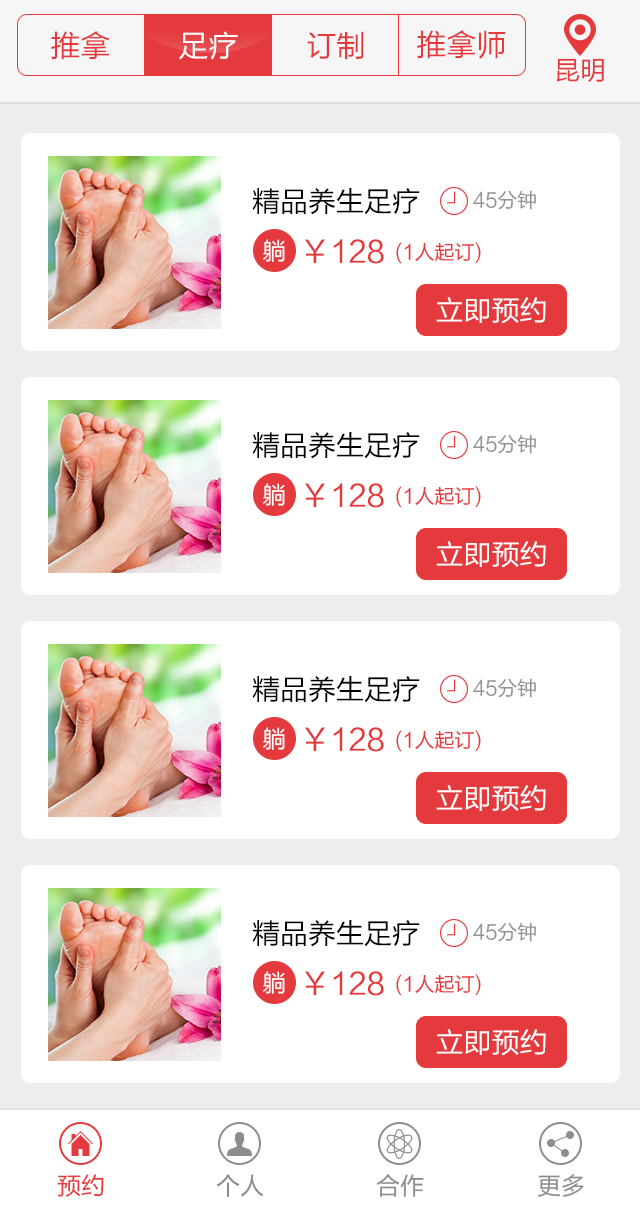
<style>
.page{position:relative;width:640px;height:1211px;background:#ffffff}
.page>*{position:absolute;margin:0}
.t1{font:30px "FZLTHJW--GB1-0";color:#e43a3d}
.t2{font:30px "FZLTHJW--GB1-0";color:#ffffff}
.t3{font:26px "FZLTHJW--GB1-0";color:#e43a3d}
.t4{font:28px "FZLTHJW--GB1-0";color:#000000}
.t5{font:20px "FZLTHJW--GB1-0";color:#929292}
.t6{font:24px "FZLTHJW--GB1-0";color:#ffffff}
.t7{font:20px "FZLTHJW--GB1-0";color:#e43a3d}
.t8{font:28px "FZLTHJW--GB1-0";color:#ffffff}
.t9{font:24px "FZLTHJW--GB1-0";color:#e43a3d}
.t10{font:24px "FZLTHJW--GB1-0";color:#8d8d8d}
</style>
<div class="page">
<p class="t1" style="left:417px;top:30px;width:89px;height:29px">推拿师</p>
<p class="t1" style="left:51px;top:31px;width:59px;height:29px">推拿</p>
<p class="t2" style="left:179px;top:31px;width:59px;height:29px">足疗</p>
<p class="t1" style="left:307px;top:31px;width:57px;height:29px">订制</p>
<p class="t3" style="left:556px;top:58px;width:48px;height:24px">昆明</p>
<p class="t4" style="left:252px;top:188px;width:168px;height:27px">精品养生足疗</p>
<p class="t5" style="left:473px;top:190px;width:63px;height:20px">45分钟</p>
<p class="t6" style="left:263px;top:239px;width:22px;height:23px">躺</p>
<p class="t1" style="left:305px;top:239px;width:79px;height:25px">￥128</p>
<p class="t7" style="left:396px;top:242px;width:85px;height:22px">(1人起订)</p>
<p class="t8" style="left:436px;top:297px;width:110px;height:27px">立即预约</p>
<p class="t4" style="left:252px;top:432px;width:168px;height:27px">精品养生足疗</p>
<p class="t5" style="left:473px;top:434px;width:63px;height:20px">45分钟</p>
<p class="t6" style="left:263px;top:483px;width:22px;height:23px">躺</p>
<p class="t1" style="left:305px;top:483px;width:79px;height:25px">￥128</p>
<p class="t7" style="left:396px;top:486px;width:85px;height:22px">(1人起订)</p>
<p class="t8" style="left:436px;top:541px;width:110px;height:27px">立即预约</p>
<p class="t4" style="left:252px;top:676px;width:168px;height:27px">精品养生足疗</p>
<p class="t5" style="left:473px;top:678px;width:63px;height:20px">45分钟</p>
<p class="t6" style="left:263px;top:727px;width:22px;height:23px">躺</p>
<p class="t1" style="left:305px;top:727px;width:79px;height:25px">￥128</p>
<p class="t7" style="left:396px;top:730px;width:85px;height:22px">(1人起订)</p>
<p class="t8" style="left:436px;top:785px;width:110px;height:27px">立即预约</p>
<p class="t4" style="left:252px;top:920px;width:168px;height:27px">精品养生足疗</p>
<p class="t5" style="left:473px;top:922px;width:63px;height:20px">45分钟</p>
<p class="t6" style="left:263px;top:971px;width:22px;height:23px">躺</p>
<p class="t1" style="left:305px;top:971px;width:79px;height:25px">￥128</p>
<p class="t7" style="left:396px;top:974px;width:85px;height:22px">(1人起订)</p>
<p class="t8" style="left:436px;top:1029px;width:110px;height:27px">立即预约</p>
<p class="t9" style="left:57px;top:1174px;width:47px;height:23px">预约</p>
<p class="t10" style="left:216px;top:1174px;width:47px;height:23px">个人</p>
<p class="t10" style="left:376px;top:1174px;width:48px;height:23px">合作</p>
<p class="t10" style="left:538px;top:1174px;width:46px;height:23px">更多</p>
</div>
